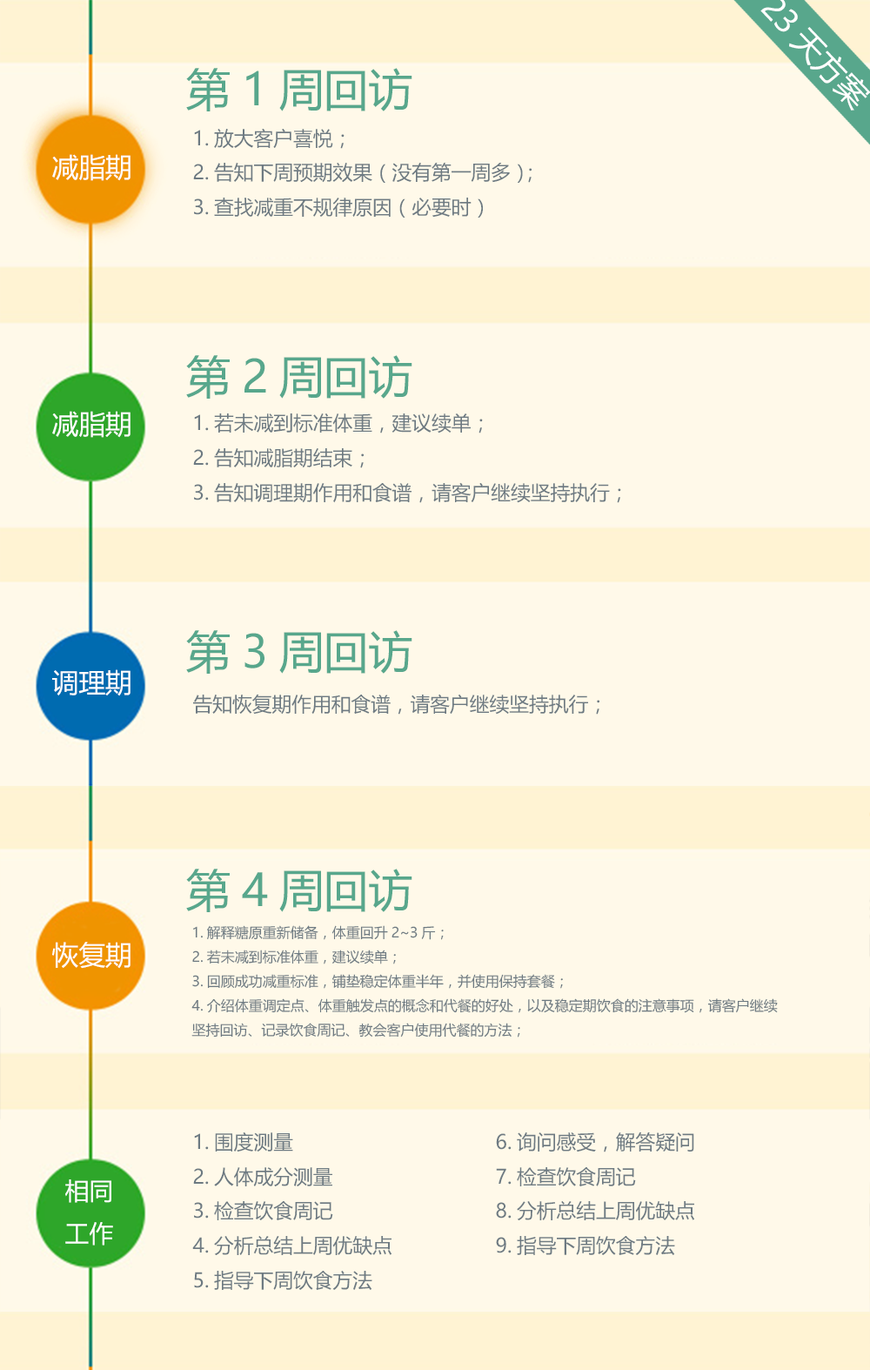
<style>
.page{position:relative;width:870px;height:1370px;background:#fff9e9}
.page>*{position:absolute;margin:0}
.t1{font:44.5px "MicrosoftYaHei";color:#58a78c}
.t2{font:19.8px "MicrosoftYaHei";color:#6d7a82}
.t3{font:26.7px "MicrosoftYaHei";color:#ffffff}
.t4{font:13.9px "MicrosoftYaHei";color:#6d7a82}
.t5{font:24.1px "MicrosoftYaHei";color:#ffffff}
</style>
<div class="page">
<p class="t1" style="left:186px;top:68px;width:227px;height:43px">第1周回访</p>
<p class="t2" style="left:193px;top:128px;width:339px;height:90px">1.放大客户喜悦；<br>2.告知下周预期效果（没有第一周多）；<br>3.查找减重不规律原因（必要时）</p>
<p class="t3" style="left:52px;top:154px;width:79px;height:27px">减脂期</p>
<p class="t1" style="left:186px;top:355px;width:227px;height:44px">第2周回访</p>
<p class="t3" style="left:52px;top:411px;width:79px;height:27px">减脂期</p>
<p class="t2" style="left:193px;top:413px;width:428px;height:90px">1.若未减到标准体重，建议续单；<br>2.告知减脂期结束；<br>3.告知调理期作用和食谱，请客户继续坚持执行；</p>
<p class="t1" style="left:186px;top:630px;width:227px;height:44px">第3周回访</p>
<p class="t3" style="left:52px;top:669px;width:79px;height:27px">调理期</p>
<p class="t2" style="left:193px;top:694px;width:407px;height:21px">告知恢复期作用和食谱，请客户继续坚持执行；</p>
<p class="t1" style="left:186px;top:869px;width:227px;height:43px">第4周回访</p>
<p class="t4" style="left:191px;top:925px;width:587px;height:113px">1.解释糖原重新储备，体重回升2~3斤；<br>2.若未减到标准体重，建议续单；<br>3.回顾成功减重标准，铺垫稳定体重半年，并使用保持套餐；<br>4.介绍体重调定点、体重触发点的概念和代餐的好处，以及稳定期饮食的注意事项，请客户继续<br>坚持回访、记录饮食周记、教会客户使用代餐的方法；</p>
<p class="t3" style="left:52px;top:942px;width:79px;height:27px">恢复期</p>
<p class="t2" style="left:192px;top:1132px;width:200px;height:158px">1.围度测量<br>2.人体成分测量<br>3.检查饮食周记<br>4.分析总结上周优缺点<br>5.指导下周饮食方法</p>
<p class="t2" style="left:496px;top:1132px;width:199px;height:123px">6.询问感受，解答疑问<br>7.检查饮食周记<br>8.分析总结上周优缺点<br>9.指导下周饮食方法</p>
<p class="t5" style="left:65px;top:1179px;width:48px;height:67px">相同<br>工作</p>
</div>
